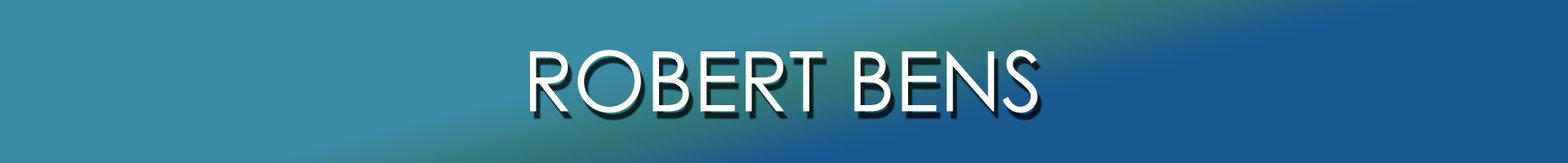
<style>
.page{position:relative;width:1568px;height:163px;background:#3b8aa4}
.page>*{position:absolute;margin:0}
.t1{font:83.3px "CenturyGothic";color:#ffffff}
</style>
<div class="page">
<p class="t1" style="left:530px;top:50px;width:508px;height:64px">ROBERT BENS</p>
</div>
